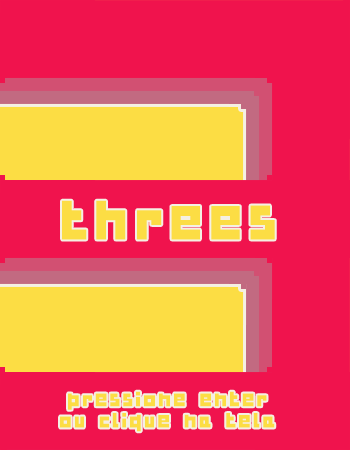
<style>
.page{position:relative;width:350px;height:450px;background:#f0134d}
.page>*{position:absolute;margin:0}
.t1{font:48.2px "BulkyPixels";color:#fcdd44}
.t2{font:17.8px "BulkyPixels";color:#fcdd44}
</style>
<div class="page">
<p class="t1" style="left:62px;top:200px;width:213px;height:40px">threes</p>
<p class="t2" style="left:60px;top:391px;width:215px;height:41px;text-align:center">pressione enter<br>ou clique na tela</p>
</div>
